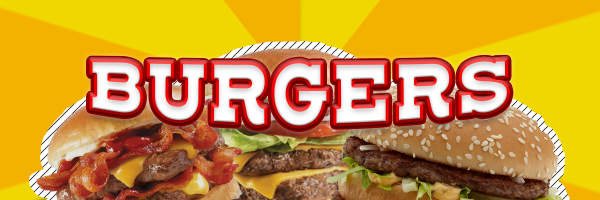
<style>
.page{position:relative;width:600px;height:200px}
.page>*{position:absolute;margin:0}
.t1{font:66.7px "HendersonSlabBasicBlack"}
</style>
<div class="page">
<p class="t1" style="left:91px;top:59px;width:418px;height:69px">BURGERS</p>
</div>
